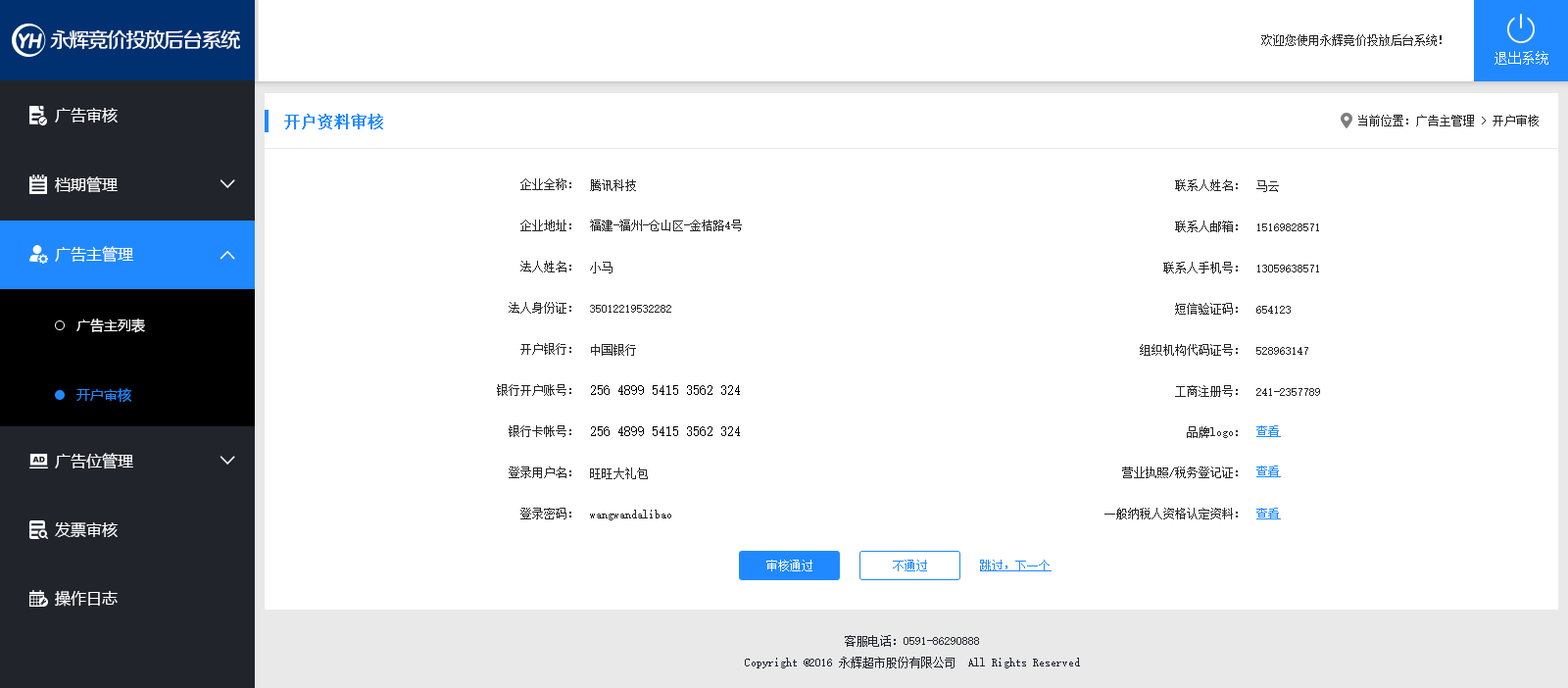
<style>
.page{position:relative;width:1568px;height:688px;background:#ffffff}
.page>*{position:absolute;margin:0}
.t1{font:20.8px "FZZZHUNHJW--GB1-0";letter-spacing:-0.1em;color:#ffffff}
.t2{font:11.8px "SimSun";color:#252525}
.t3{font:13.7px "SimSun";color:#ffffff}
.t4{font:15.7px "MicrosoftYaHei";color:#ffffff}
.t5{font:15.7px "SimSun";color:#2089ff;font-weight:bold}
.t6{font:19.6px "SimSun";color:#ffffff;font-weight:bold;scale:1.04 1}
.t7{font:13.7px "MicrosoftYaHei";color:#ffffff}
.t8{font:13.7px "MicrosoftYaHei";color:#2089ff}
.t9{font:13.7px "SimSun";color:#000000}
.t10{font:11.8px "SimSun";color:#2089ff;text-decoration:underline}
.t11{font:11.8px "SimSun";color:#ffffff}
.t12{font:11.8px "SimSun";color:#2089ff}
.t13{font:11.8px "SimSun";color:#21242b}
</style>
<div class="page">
<p class="t1" style="left:50px;top:29px;width:190px;height:21px">永辉竞价投放后台系统</p>
<p class="t2" style="left:1261px;top:34px;width:181px;height:12px">欢迎您使用永辉竞价投放后台系统！</p>
<p class="t3" style="left:1494px;top:51px;width:54px;height:14px">退出系统</p>
<p class="t4" style="left:55px;top:108px;width:63px;height:14px">广告审核</p>
<p class="t5" style="left:284px;top:114px;width:99px;height:15px">开户资料审核</p>
<p class="t2" style="left:1358px;top:115px;width:181px;height:11px">当前位置：广告主管理 &gt; 开户审核</p>
<p class="t4" style="left:55px;top:176px;width:63px;height:17px">档期管理</p>
<p class="t6" style="left:220px;top:179px;width:15px;height:9px;rotate:90deg">&gt;</p>
<p class="t2" style="left:520px;top:178px;width:51px;height:12px">企业全称：</p>
<p class="t2" style="left:590px;top:179px;width:46px;height:12px">腾讯科技</p>
<p class="t2" style="left:1175px;top:179px;width:63px;height:12px">联系人姓名：</p>
<p class="t2" style="left:1256px;top:180px;width:23px;height:12px">马云</p>
<p class="t2" style="left:520px;top:220px;width:51px;height:11px">企业地址：</p>
<p class="t2" style="left:590px;top:220px;width:152px;height:11px">福建-福州-仓山区-金桔路4号</p>
<p class="t2" style="left:1175px;top:220px;width:63px;height:12px">联系人邮箱：</p>
<p class="t2" style="left:1257px;top:223px;width:62px;height:8px">15169828571</p>
<p class="t4" style="left:55px;top:246px;width:78px;height:17px">广告主管理</p>
<p class="t6" style="left:220px;top:251px;width:15px;height:9px;rotate:-90deg">&gt;</p>
<p class="t2" style="left:520px;top:261px;width:51px;height:11px">法人姓名：</p>
<p class="t2" style="left:590px;top:262px;width:22px;height:11px">小马</p>
<p class="t2" style="left:1163px;top:262px;width:75px;height:11px">联系人手机号：</p>
<p class="t2" style="left:1257px;top:265px;width:62px;height:7px">13059638571</p>
<p class="t2" style="left:509px;top:302px;width:62px;height:12px">法人身份证：</p>
<p class="t2" style="left:590px;top:305px;width:81px;height:8px">35012219532282</p>
<p class="t2" style="left:1175px;top:303px;width:63px;height:12px">短信验证码：</p>
<p class="t2" style="left:1256px;top:306px;width:35px;height:8px">654123</p>
<p class="t7" style="left:76px;top:318px;width:69px;height:15px">广告主列表</p>
<p class="t2" style="left:520px;top:343px;width:51px;height:12px">开户银行：</p>
<p class="t2" style="left:591px;top:344px;width:45px;height:12px">中国银行</p>
<p class="t2" style="left:1140px;top:344px;width:98px;height:12px">组织机构代码证号：</p>
<p class="t2" style="left:1256px;top:347px;width:52px;height:8px">528963147</p>
<p class="t8" style="left:76px;top:388px;width:55px;height:15px">开户审核</p>
<p class="t2" style="left:497px;top:384px;width:74px;height:12px">银行开户账号：</p>
<p class="t9" style="left:591px;top:385px;width:149px;height:10px">256 4899 5415 3562 324</p>
<p class="t2" style="left:1175px;top:385px;width:63px;height:12px">工商注册号：</p>
<p class="t2" style="left:1256px;top:388px;width:64px;height:8px">241-2357789</p>
<p class="t2" style="left:509px;top:425px;width:62px;height:12px">银行卡帐号：</p>
<p class="t10" style="left:1256px;top:425px;width:25px;height:12px">查看</p>
<p class="t9" style="left:591px;top:426px;width:149px;height:10px">256 4899 5415 3562 324</p>
<p class="t2" style="left:1187px;top:426px;width:51px;height:12px">品牌logo：</p>
<p class="t4" style="left:55px;top:453px;width:78px;height:16px">广告位管理</p>
<p class="t6" style="left:220px;top:456px;width:15px;height:9px;rotate:90deg">&gt;</p>
<p class="t2" style="left:509px;top:466px;width:62px;height:12px">登录用户名：</p>
<p class="t2" style="left:590px;top:467px;width:58px;height:12px">旺旺大礼包</p>
<p class="t2" style="left:1122px;top:466px;width:116px;height:12px">营业执照/税务登记证：</p>
<p class="t10" style="left:1256px;top:466px;width:25px;height:11px">查看</p>
<p class="t2" style="left:520px;top:508px;width:51px;height:11px">登录密码：</p>
<p class="t2" style="left:590px;top:510px;width:81px;height:10px">wangwandalibao</p>
<p class="t2" style="left:1104px;top:508px;width:134px;height:11px">一般纳税人资格认定资料：</p>
<p class="t10" style="left:1256px;top:508px;width:25px;height:11px">查看</p>
<p class="t4" style="left:55px;top:522px;width:63px;height:15px">发票审核</p>
<p class="t11" style="left:766px;top:560px;width:46px;height:11px">审核通过</p>
<p class="t12" style="left:893px;top:560px;width:34px;height:11px">不通过</p>
<p class="t10" style="left:980px;top:560px;width:72px;height:11px">跳过，下一个</p>
<p class="t4" style="left:55px;top:591px;width:63px;height:16px">操作日志</p>
<p class="t13" style="left:845px;top:635px;width:134px;height:12px">客服电话：0591-86290888</p>
<p class="t13" style="left:745px;top:657px;width:335px;height:11px">Copyright @2016 永辉超市股份有限公司  All Rights Reserved</p>
</div>
